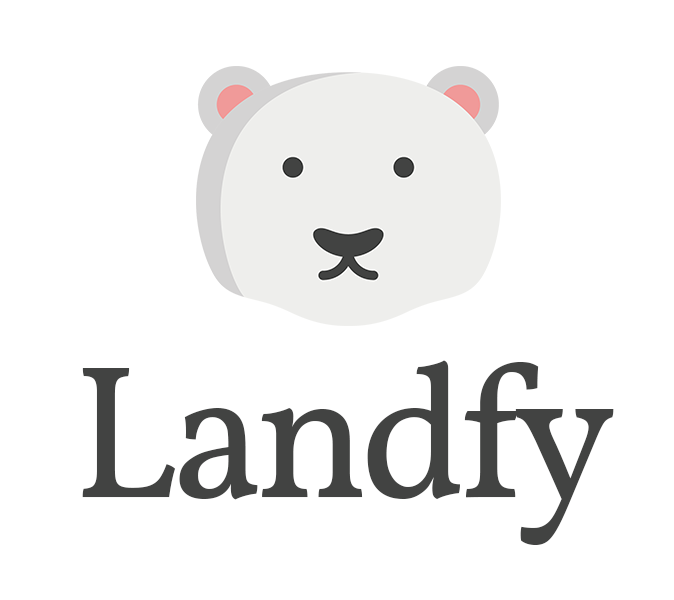
<style>
.page{position:relative;width:674px;height:600px;background:#ffffff}
.page>*{position:absolute;margin:0}
.t1{font:191.2px "Vollkorn-Regular";letter-spacing:-0.05em;color:#424342}
</style>
<div class="page">
<p class="t1" style="left:82px;top:360px;width:532px;height:185px">Landfy</p>
</div>
